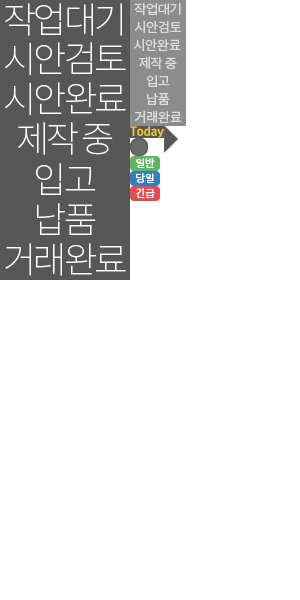
<style>
.page{position:relative;width:300px;height:600px;background:#ffffff}
.page>*{position:absolute;margin:0}
.t1{font:36px "NotoSansCJKkr-Thin";letter-spacing:-0.08em;color:#ffffff}
.t2{font:10.5px "NotoSansCJKkr-Medium";letter-spacing:-0.025em;color:#ffffff}
</style>
<div class="page">
<p class="t1" style="left:5px;top:3px;width:117px;height:33px">작업대기</p>
<p class="t1" style="left:5px;top:42px;width:121px;height:33px">시안검토</p>
<p class="t1" style="left:5px;top:82px;width:121px;height:33px">시안완료</p>
<p class="t1" style="left:18px;top:122px;width:95px;height:33px">제작 중</p>
<p class="t2" style="left:136px;top:158px;width:19px;height:10px">일반</p>
<p class="t1" style="left:36px;top:163px;width:60px;height:32px">입고</p>
<p class="t2" style="left:136px;top:173px;width:18px;height:10px">당일</p>
<p class="t2" style="left:136px;top:188px;width:19px;height:10px">긴급</p>
<p class="t1" style="left:37px;top:203px;width:59px;height:32px">납품</p>
<p class="t1" style="left:5px;top:243px;width:121px;height:33px">거래완료</p>
</div>
